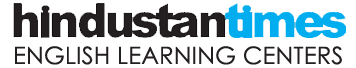
<style>
.page{position:relative;width:356px;height:68px;background:#ffffff}
.page>*{position:absolute;margin:0}
.t1{font:24px "CenturyGothic";letter-spacing:0.005em;color:#231f20}
</style>
<div class="page">
<p class="t1" style="left:15px;top:46px;width:327px;height:19px">ENGLISH LEARNING CENTERS</p>
</div>
